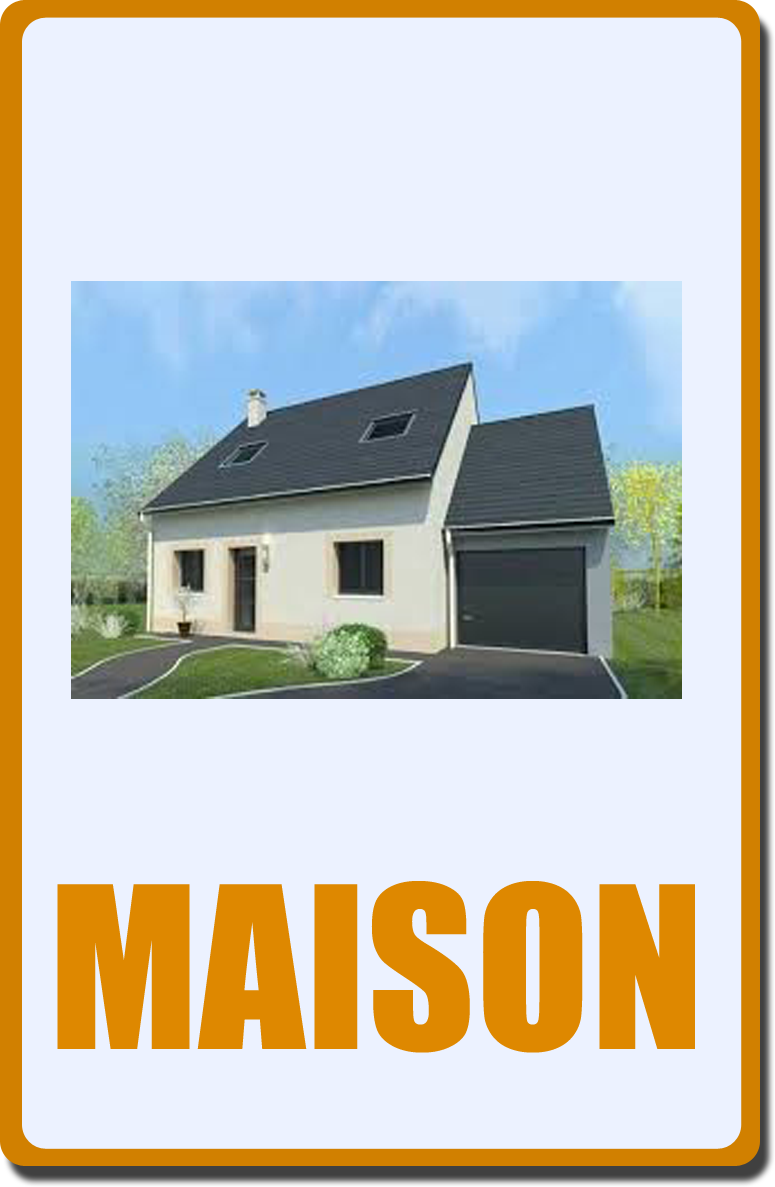
<style>
.page{position:relative;width:775px;height:1187px;background:#ecf2ff}
.page>*{position:absolute;margin:0}
.t1{font:208.3px "Impact";letter-spacing:0.005em;color:#de8800}
</style>
<div class="page">
<p class="t1" style="left:57px;top:881px;width:638px;height:172px">MAISON</p>
</div>
